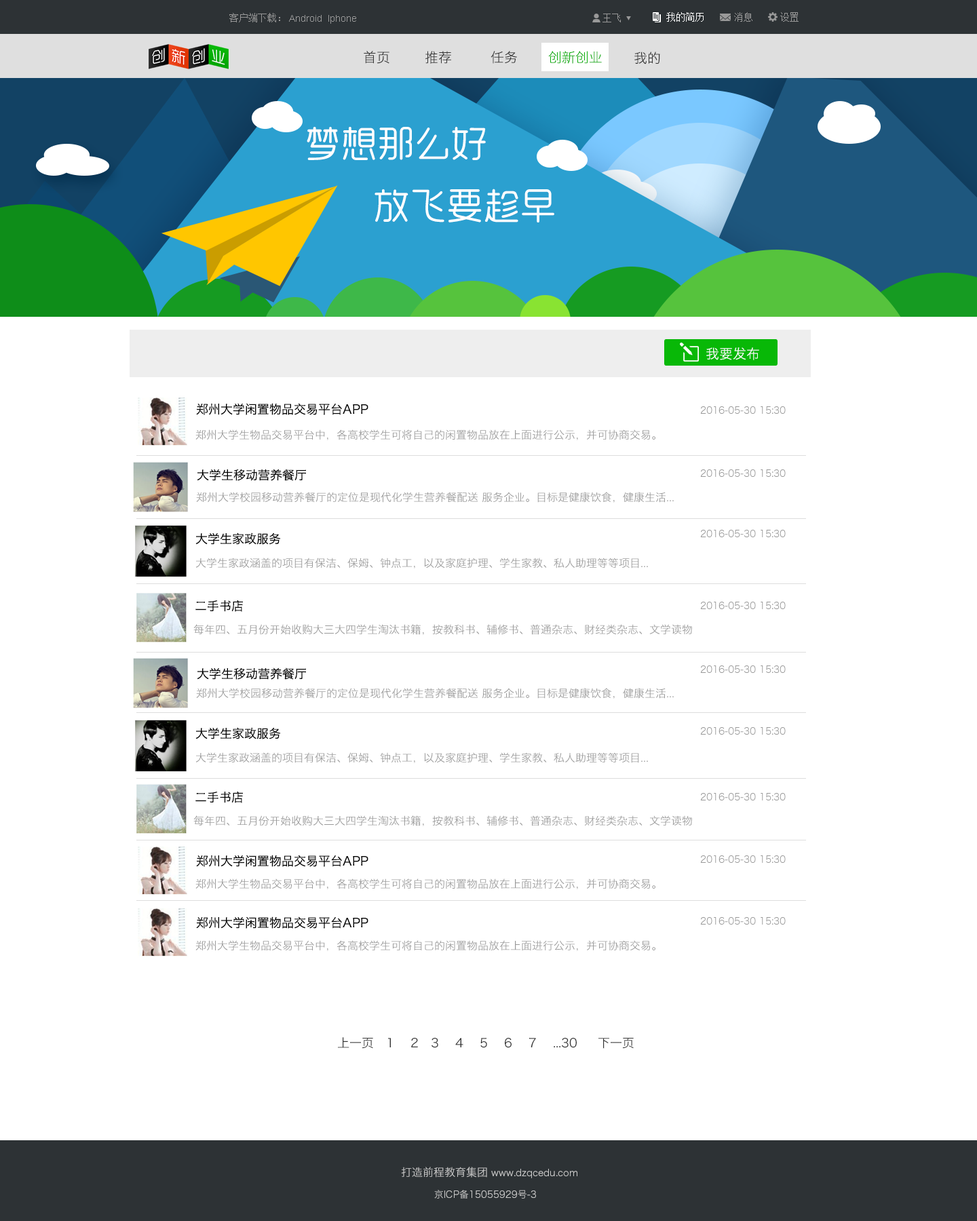
<style>
.page{position:relative;width:977px;height:1221px;background:#ffffff}
.page>*{position:absolute;margin:0}
.t1{font:9.5px "SimSun";color:#999999}
.t2{font:9.5px "ArialMT";color:#999999}
.t3{font:9.5px "SimSun";color:#ffffff}
.t4{font:13.6px "HiraginoSansGB-W3";color:#333333}
.t5{font:13.6px "HiraginoSansGB-W3";color:#05ae04}
.t6{font:36.6px "RTWSYueRoudGoDemo-Regular";color:#ffffff}
.t7{font:13.6px "HiraginoSansGB-W3";color:#ffffff}
.t8{font:12.2px "HiraginoSansGB-W3";color:#000000}
.t9{font:9.5px "HiraginoSansGB-W3";color:#999999}
.t10{font:10.9px "HiraginoSansGB-W3";color:#999999}
.t11{font:12.2px "HiraginoSansGB-W3";color:#333333}
.t12{font:9.5px "HiraginoSansGB-W3";color:#cccccc}
.t13{font:10.9px "HiraginoSansGB-W3";color:#cccccc}
</style>
<div class="page">
<p class="t1" style="left:229px;top:13px;width:51px;height:9px">客户端下载：</p>
<p class="t2" style="left:289px;top:15px;width:67px;height:9px">Android  Iphone</p>
<p class="t1" style="left:602px;top:14px;width:19px;height:8px">王飞</p>
<p class="t3" style="left:666px;top:12px;width:37px;height:10px">我的简历</p>
<p class="t1" style="left:734px;top:12px;width:18px;height:10px">消息</p>
<p class="t1" style="left:780px;top:12px;width:18px;height:10px">设置</p>
<p class="t4" style="left:364px;top:51px;width:25px;height:13px">首页</p>
<p class="t4" style="left:425px;top:51px;width:26px;height:13px">推荐</p>
<p class="t4" style="left:490px;top:51px;width:27px;height:13px">任务</p>
<p class="t5" style="left:548px;top:51px;width:54px;height:13px">创新创业</p>
<p class="t4" style="left:634px;top:52px;width:26px;height:12px">我的</p>
<p class="t6" style="left:307px;top:127px;width:179px;height:33px">梦想那么好</p>
<p class="t6" style="left:374px;top:189px;width:180px;height:33px">放飞要趁早</p>
<p class="t7" style="left:706px;top:347px;width:53px;height:13px">我要发布</p>
<p class="t8" style="left:196px;top:403px;width:172px;height:12px">郑州大学闲置物品交易平台APP</p>
<p class="t9" style="left:700px;top:406px;width:85px;height:8px">2016-05-30 15:30</p>
<p class="t10" style="left:195px;top:429px;width:460px;height:11px">郑州大学生物品交易平台中，各高校学生可将自己的闲置物品放在上面进行公示，并可协商交易。</p>
<p class="t8" style="left:197px;top:469px;width:109px;height:12px">大学生移动营养餐厅</p>
<p class="t9" style="left:700px;top:469px;width:85px;height:8px">2016-05-30 15:30</p>
<p class="t10" style="left:196px;top:492px;width:478px;height:11px">郑州大学校园移动营养餐厅的定位是现代化学生营养餐配送 服务企业。目标是健康饮食，健康生活...</p>
<p class="t8" style="left:195px;top:532px;width:86px;height:13px">大学生家政服务</p>
<p class="t9" style="left:700px;top:530px;width:85px;height:7px">2016-05-30 15:30</p>
<p class="t10" style="left:195px;top:558px;width:453px;height:10px">大学生家政涵盖的项目有保洁、保姆、钟点工，以及家庭护理、学生家教、私人助理等等项目...</p>
<p class="t8" style="left:195px;top:600px;width:48px;height:12px">二手书店</p>
<p class="t9" style="left:700px;top:602px;width:85px;height:7px">2016-05-30 15:30</p>
<p class="t10" style="left:193px;top:624px;width:499px;height:11px">每年四、五月份开始收购大三大四学生淘汰书籍，按教科书、辅修书、普通杂志、财经类杂志、文学读物</p>
<p class="t9" style="left:700px;top:665px;width:85px;height:8px">2016-05-30 15:30</p>
<p class="t8" style="left:197px;top:667px;width:109px;height:13px">大学生移动营养餐厅</p>
<p class="t10" style="left:196px;top:688px;width:478px;height:11px">郑州大学校园移动营养餐厅的定位是现代化学生营养餐配送 服务企业。目标是健康饮食，健康生活...</p>
<p class="t8" style="left:195px;top:727px;width:86px;height:12px">大学生家政服务</p>
<p class="t9" style="left:700px;top:727px;width:85px;height:8px">2016-05-30 15:30</p>
<p class="t10" style="left:195px;top:752px;width:453px;height:11px">大学生家政涵盖的项目有保洁、保姆、钟点工，以及家庭护理、学生家教、私人助理等等项目...</p>
<p class="t8" style="left:195px;top:791px;width:48px;height:12px">二手书店</p>
<p class="t9" style="left:700px;top:793px;width:85px;height:7px">2016-05-30 15:30</p>
<p class="t10" style="left:193px;top:815px;width:499px;height:11px">每年四、五月份开始收购大三大四学生淘汰书籍，按教科书、辅修书、普通杂志、财经类杂志、文学读物</p>
<p class="t8" style="left:196px;top:855px;width:172px;height:12px">郑州大学闲置物品交易平台APP</p>
<p class="t9" style="left:700px;top:855px;width:85px;height:8px">2016-05-30 15:30</p>
<p class="t10" style="left:195px;top:878px;width:460px;height:11px">郑州大学生物品交易平台中，各高校学生可将自己的闲置物品放在上面进行公示，并可协商交易。</p>
<p class="t8" style="left:196px;top:916px;width:172px;height:13px">郑州大学闲置物品交易平台APP</p>
<p class="t9" style="left:700px;top:917px;width:85px;height:7px">2016-05-30 15:30</p>
<p class="t10" style="left:195px;top:940px;width:460px;height:11px">郑州大学生物品交易平台中，各高校学生可将自己的闲置物品放在上面进行公示，并可协商交易。</p>
<p class="t11" style="left:338px;top:1037px;width:295px;height:12px">上一页   1    2   3    4    5    6    7    ...30     下一页</p>
<p class="t12" style="left:401px;top:1167px;width:176px;height:11px"><span class="t13">打造前程教育集团</span> www.dzqcedu.com</p>
<p class="t12" style="left:434px;top:1190px;width:102px;height:8px">京ICP备15055929号-3</p>
</div>
